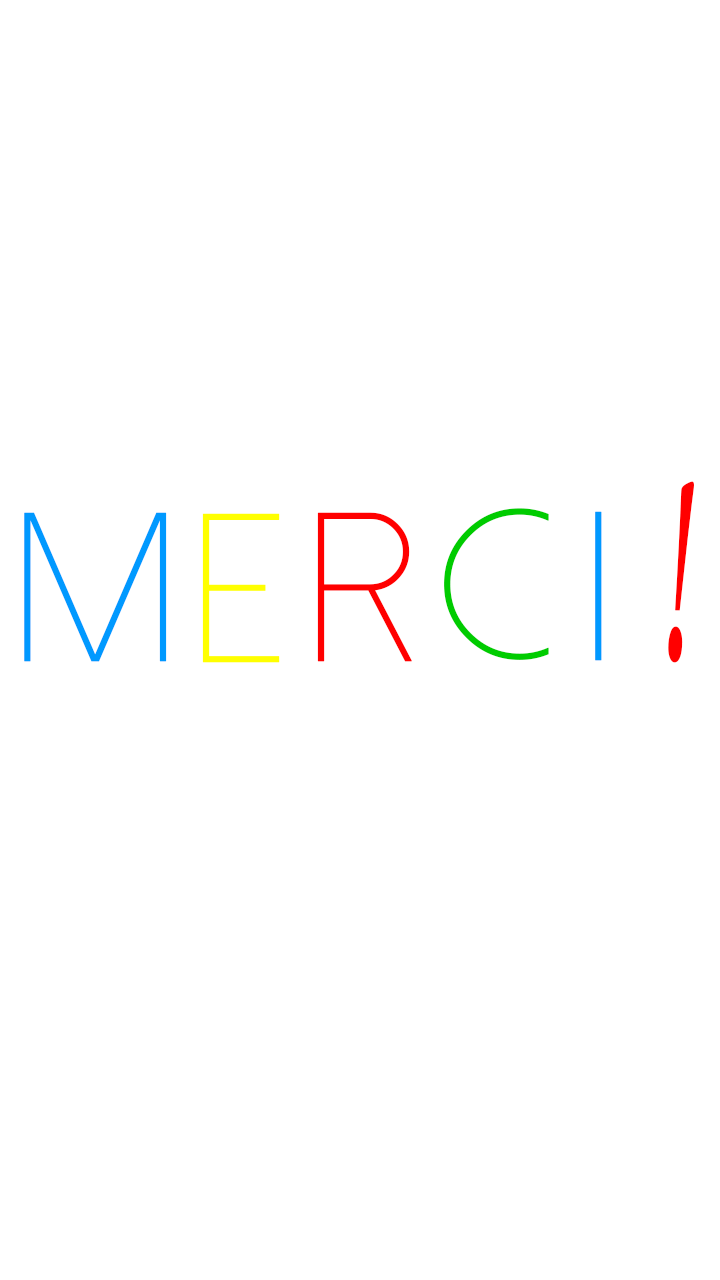
<style>
.page{position:relative;width:720px;height:1280px;background:#ffffff}
.page>*{position:absolute;margin:0}
.t1{font:297.9px "MonotypeCorsiva";color:#ff0000;font-weight:bold;scale:0.45 1}
.t2{font:101.5px "DolceVitaLight";color:#00cc00;font-weight:bold}
.t3{font:101.5px "DolceVitaLight";color:#0099ff;font-weight:bold}
.t4{font:101.5px "DolceVitaLight";color:#ffff00;font-weight:bold}
.t5{font:101.5px "DolceVitaLight";color:#ff0000;font-weight:bold}
</style>
<div class="page">
<p class="t1" style="left:668px;top:481px;width:26px;height:182px">!</p>
<p class="t2" style="left:444px;top:508px;width:105px;height:152px">c</p>
<p class="t3" style="left:24px;top:512px;width:143px;height:150px">M</p>
<p class="t4" style="left:202px;top:513px;width:78px;height:150px">e</p>
<p class="t5" style="left:317px;top:512px;width:95px;height:150px">r</p>
<p class="t3" style="left:595px;top:511px;width:7px;height:150px">i</p>
</div>
